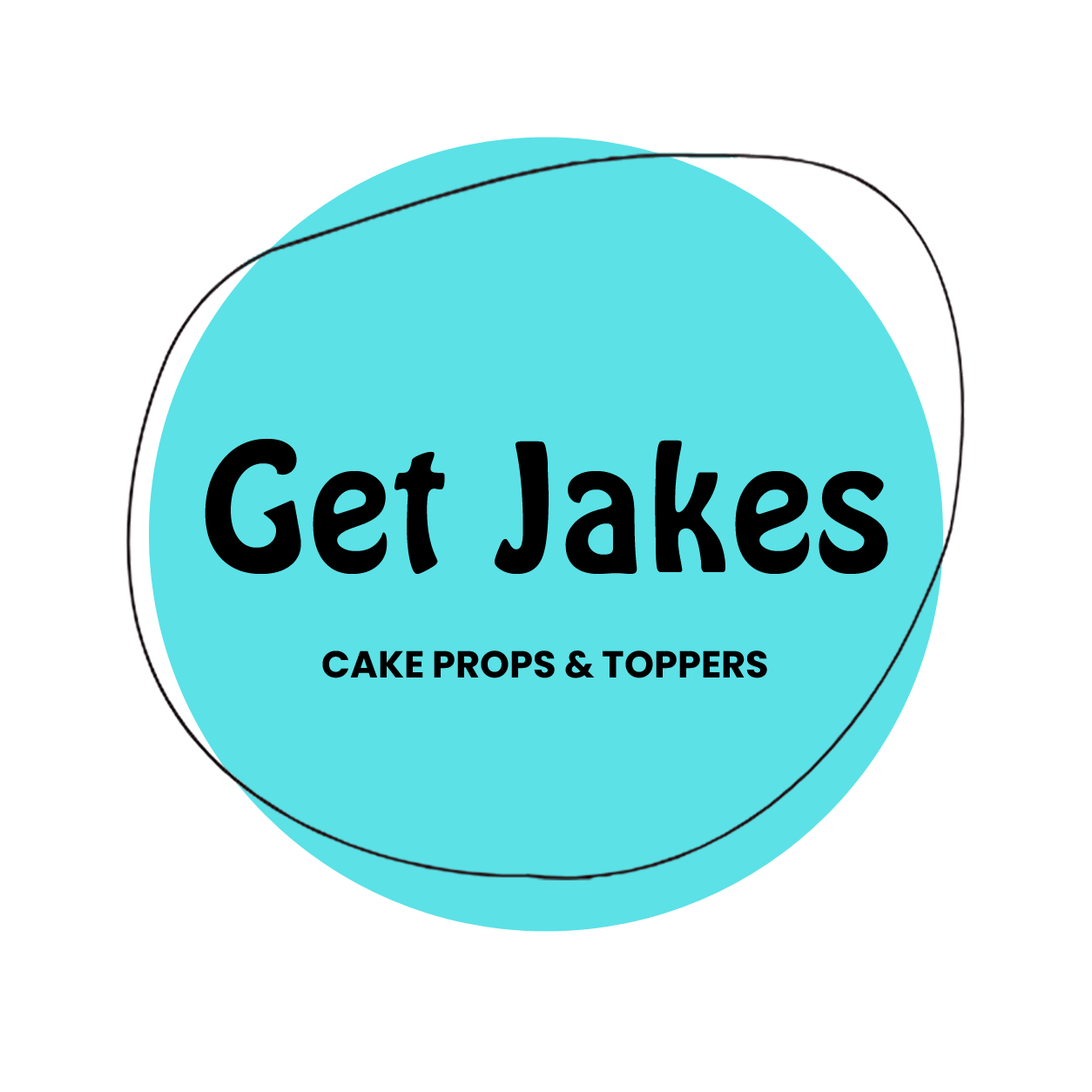
<style>
.page{position:relative;width:1092px;height:1092px;background:#ffffff}
.page>*{position:absolute;margin:0}
.t1{font:171.4px "HoboBT-Regular";color:#000000}
.t2{font:37.6px "Poppins-Bold";color:#000000}
</style>
<div class="page">
<p class="t1" style="left:205px;top:438px;width:683px;height:136px">Get Jakes</p>
<p class="t2" style="left:322px;top:650px;width:445px;height:28px">CAKE PROPS &amp; TOPPERS</p>
</div>
